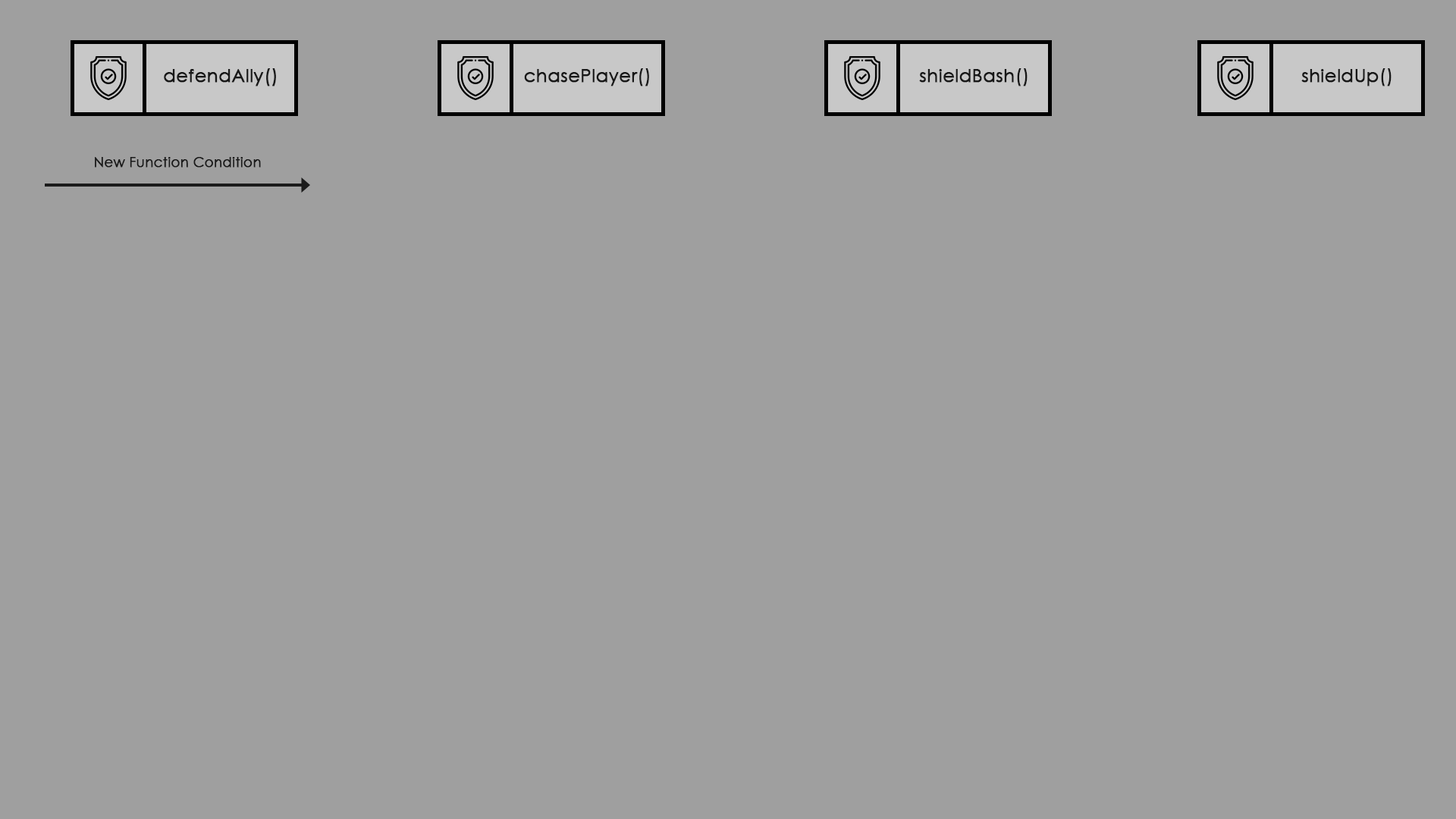
<style>
.page{position:relative;width:1456px;height:819px;background:#9f9f9f}
.page>*{position:absolute;margin:0}
.t1{font:18.2px "CenturyGothic";color:#181818;font-weight:bold}
.t2{font:13.6px "CenturyGothic";color:#181818;font-weight:bold}
</style>
<div class="page">
<p class="t1" style="left:164px;top:68px;width:112px;height:18px">defendAlly()</p>
<p class="t1" style="left:524px;top:68px;width:125px;height:18px">chasePlayer()</p>
<p class="t1" style="left:919px;top:68px;width:109px;height:18px">shieldBash()</p>
<p class="t1" style="left:1301px;top:68px;width:91px;height:18px">shieldUp()</p>
<p class="t2" style="left:95px;top:157px;width:166px;height:11px">New Function Condition</p>
</div>
